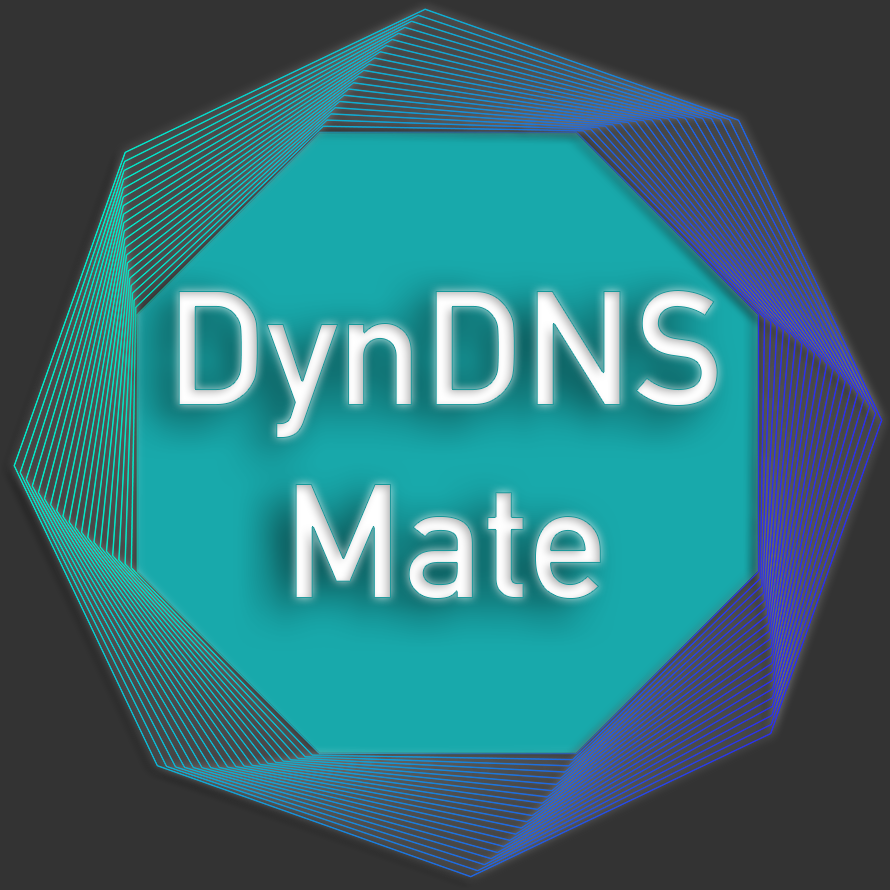
<style>
.page{position:relative;width:890px;height:890px;background:#333333}
.page>*{position:absolute;margin:0}
.t1{font:160.1px/193.2px "DINAlternate-Bold";color:#ffffff}
</style>
<div class="page">
<p class="t1" style="left:178px;top:290px;width:540px;height:309px;text-align:center">DynDNS<br>Mate</p>
</div>
